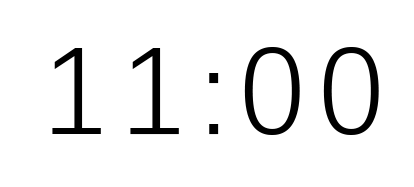
<style>
.page{position:relative;width:414px;height:187px;background:#ffffff}
.page>*{position:absolute;margin:0}
.t1{font:125px "DengXian";letter-spacing:0.1em;color:#000000}
</style>
<div class="page">
<p class="t1" style="left:52px;top:47px;width:327px;height:88px">11:00</p>
</div>
